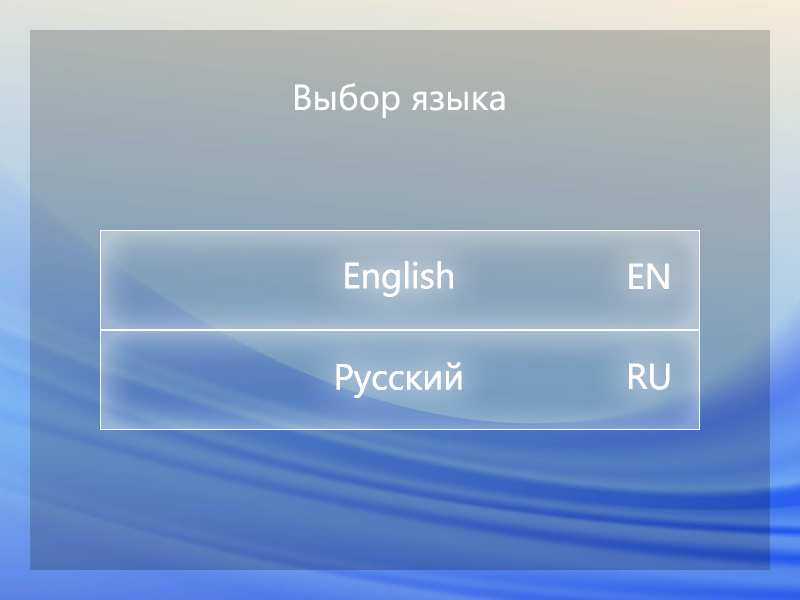
<style>
.page{position:relative;width:800px;height:600px}
.page>*{position:absolute;margin:0}
.t1{font:36px "SegoeUI";color:#ffffff}
</style>
<div class="page">
<p class="t1" style="left:295px;top:83px;width:210px;height:36px">Выбор языка</p>
<p class="t1" style="left:345px;top:261px;width:108px;height:36px">English</p>
<p class="t1" style="left:345px;top:261px;width:108px;height:36px">English</p>
<p class="t1" style="left:629px;top:263px;width:40px;height:26px">EN</p>
<p class="t1" style="left:629px;top:263px;width:40px;height:26px">EN</p>
<p class="t1" style="left:336px;top:362px;width:126px;height:36px">Русский</p>
<p class="t1" style="left:336px;top:362px;width:126px;height:36px">Русский</p>
<p class="t1" style="left:629px;top:363px;width:41px;height:27px">RU</p>
<p class="t1" style="left:629px;top:363px;width:41px;height:27px">RU</p>
</div>
